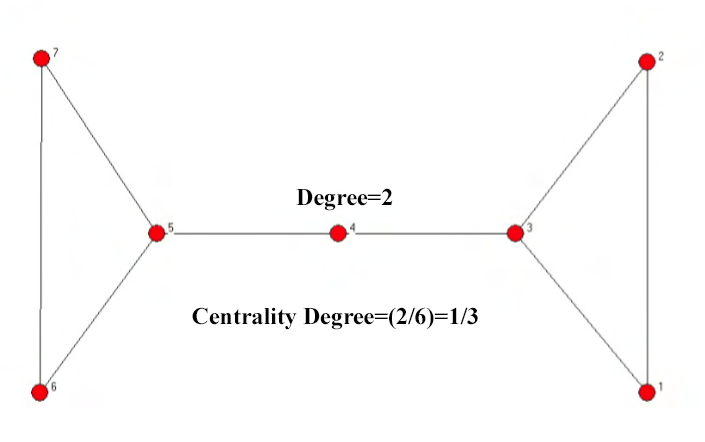
<style>
.page{position:relative;width:705px;height:442px;background:#ffffff}
.page>*{position:absolute;margin:0}
.t1{font:24px "TimesNewRomanPS-BoldMT";color:#040404}
</style>
<div class="page">
<p class="t1" style="left:296px;top:188px;width:97px;height:23px">Degree=2</p>
<p class="t1" style="left:192px;top:307px;width:286px;height:23px">Centrality Degree=(2/6)=1/3</p>
</div>
